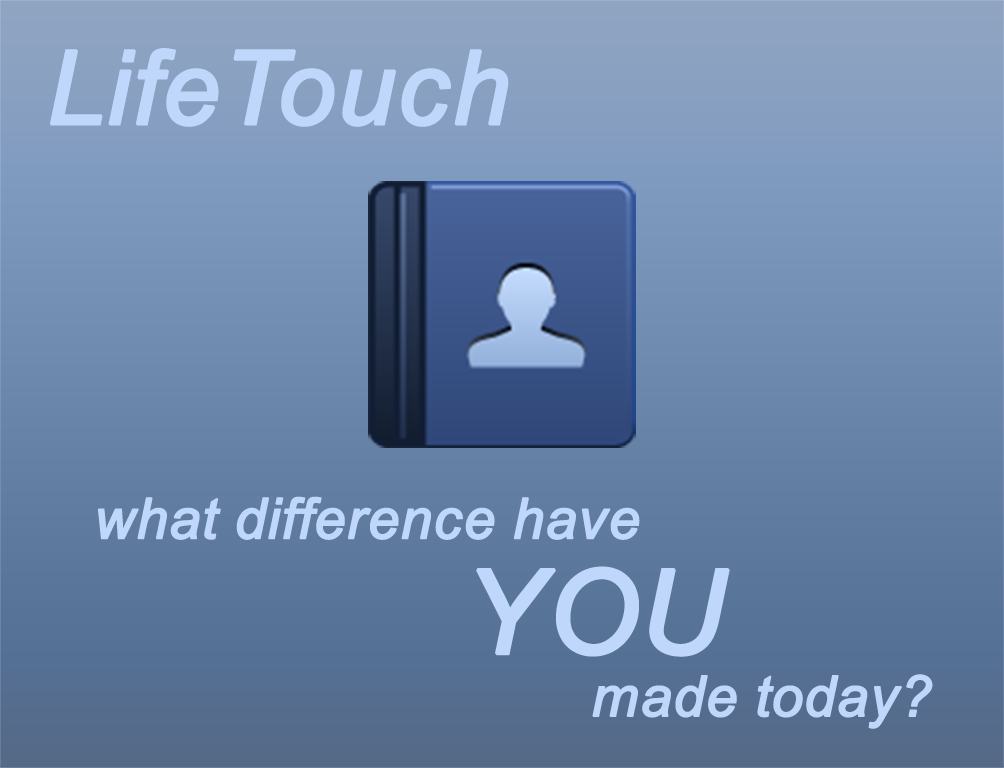
<style>
.page{position:relative;width:1004px;height:768px}
.page>*{position:absolute;margin:0}
.t1{font:102.4px "Arial-ItalicMT";color:#bfd7fb;font-weight:bold}
.t2{font:56.1px "Arial-ItalicMT";color:#bfd7fb;font-weight:bold}
.t3{font:117.1px "Arial-ItalicMT";color:#bfd7fb;font-weight:bold}
</style>
<div class="page">
<p class="t1" style="left:50px;top:48px;width:459px;height:79px">LifeTouch</p>
<p class="t2" style="left:98px;top:496px;width:542px;height:44px">what difference have</p>
<p class="t3" style="left:476px;top:566px;width:254px;height:91px">YOU</p>
<p class="t2" style="left:592px;top:674px;width:341px;height:55px">made today?</p>
</div>
